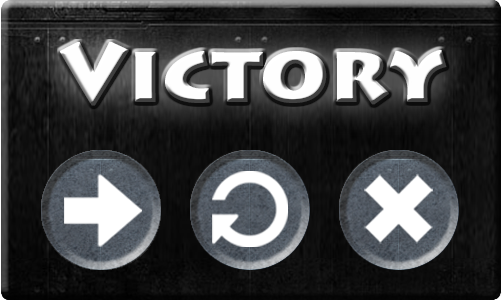
<style>
.page{position:relative;width:502px;height:300px}
.page>*{position:absolute;margin:0}
.t1{font:81.5px "LithosPro-Black";color:#fefefe;font-weight:bold}
</style>
<div class="page">
<p class="t1" style="left:60px;top:42px;width:387px;height:64px">Victory</p>
</div>
